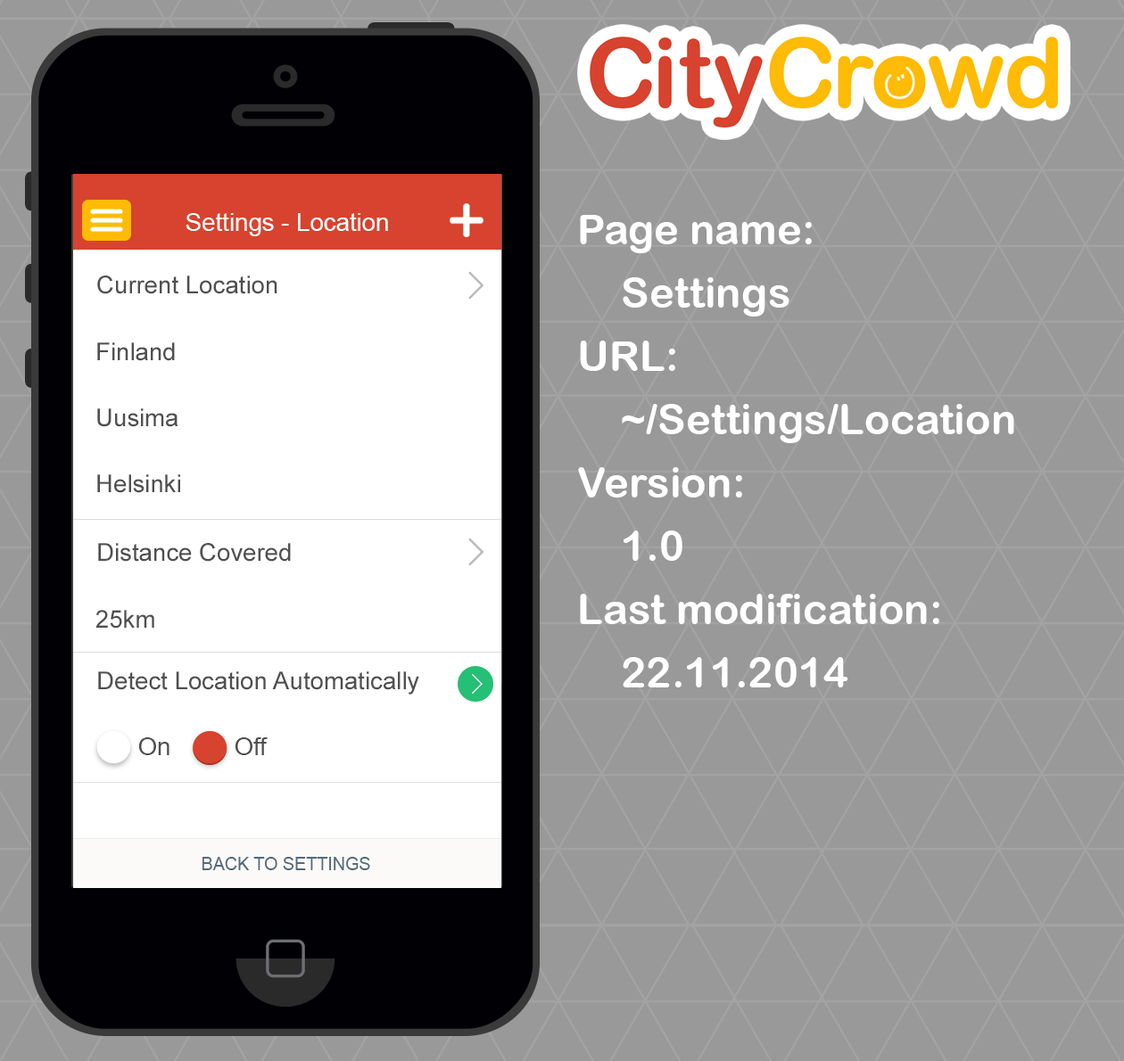
<style>
.page{position:relative;width:1124px;height:1061px;background:#999999}
.page>*{position:absolute;margin:0}
.t1{font:24.6px "ArialMT";color:#ffffff}
.t2{font:42.2px/63.3px "ArialRoundedMTBold";color:#ffffff}
.t3{font:24.6px "ArialMT";color:#505050}
.t4{font:24.6px/66px "ArialMT";color:#505050}
.t5{font:17.6px "ArialMT";color:#536a7a}
</style>
<div class="page">
<p class="t1" style="left:185px;top:213px;width:203px;height:23px">Settings - Location</p>
<p class="t2" style="left:578px;top:215px;width:436px;height:473px">Page name:<br>Settings<br>URL:<br>~/Settings/Location<br>Version:<br>1.0<br>Last modification:<br>22.11.2014</p>
<p class="t3" style="left:97px;top:276px;width:180px;height:18px">Current Location</p>
<p class="t4" style="left:97px;top:342px;width:83px;height:151px">Finland<br>Uusima<br>Helsinki</p>
<p class="t3" style="left:98px;top:543px;width:193px;height:19px">Distance Covered</p>
<p class="t3" style="left:95px;top:610px;width:59px;height:19px">25km</p>
<p class="t3" style="left:98px;top:672px;width:321px;height:23px">Detect Location Automatically</p>
<p class="t3" style="left:138px;top:738px;width:31px;height:17px">On</p>
<p class="t3" style="left:235px;top:738px;width:33px;height:17px">Off</p>
<p class="t5" style="left:202px;top:857px;width:168px;height:13px">BACK TO SETTINGS</p>
</div>
